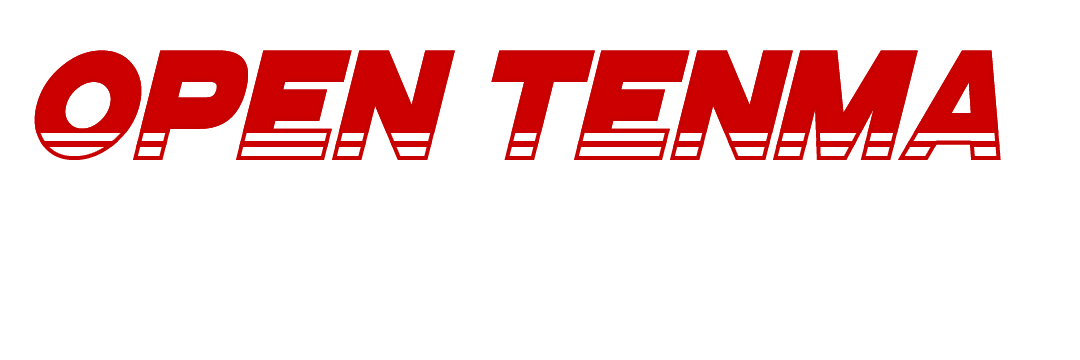
<style>
.page{position:relative;width:1080px;height:360px;background:#ffffff}
.page>*{position:absolute;margin:0}
.t1{font:159.6px "GoGoPosterPunch-Italic";color:#cd0000;scale:0.94 1}
</style>
<div class="page">
<p class="t1" style="left:34px;top:50px;width:967px;height:110px">OPEN TENMA</p>
<p class="t1" style="left:34px;top:50px;width:967px;height:110px">OPEN TENMA</p>
</div>
